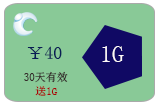
<style>
.page{position:relative;width:159px;height:105px;background:#89c997}
.page>*{position:absolute;margin:0}
.t1{font:18px "SimSun";color:#091e54}
.t2{font:24px "SimSun";color:#fef9f9}
.t3{font:11px "SimSun";color:#352a2a}
.t4{font:11px "SimSun";color:#a80707}
</style>
<div class="page">
<p class="t1" style="left:27px;top:46px;width:35px;height:13px">￥40</p>
<p class="t2" style="left:102px;top:46px;width:22px;height:16px">1G</p>
<p class="t3" style="left:24px;top:71px;width:44px;height:12px">30天有效</p>
<p class="t4" style="left:35px;top:86px;width:23px;height:10px">送1G</p>
</div>
